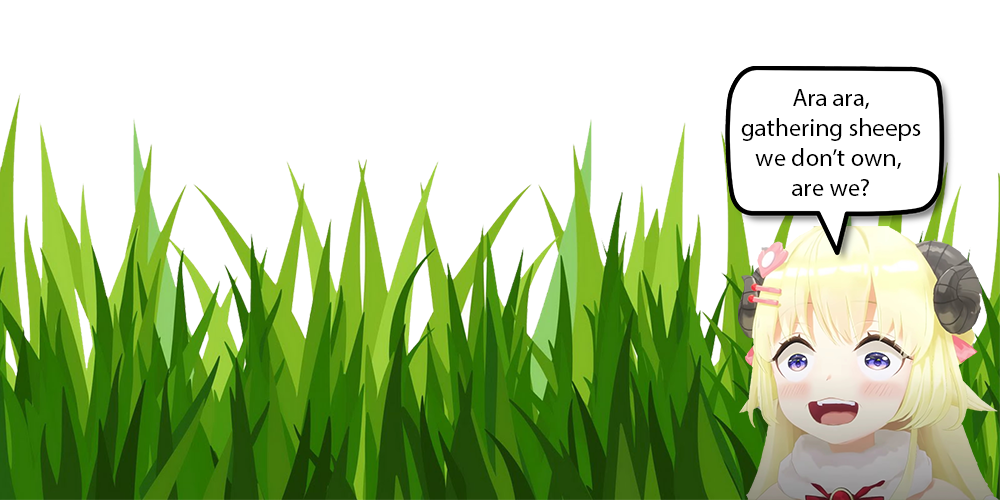
<style>
.page{position:relative;width:1000px;height:500px;background:#ffffff}
.page>*{position:absolute;margin:0}
.t1{font:25px "MyriadPro-Regular";color:#000000}
</style>
<div class="page">
<p class="t1" style="left:741px;top:89px;width:180px;height:107px;text-align:center">Ara ara,<br>gathering sheeps<br>we don’t own, <br>are we?</p>
</div>
